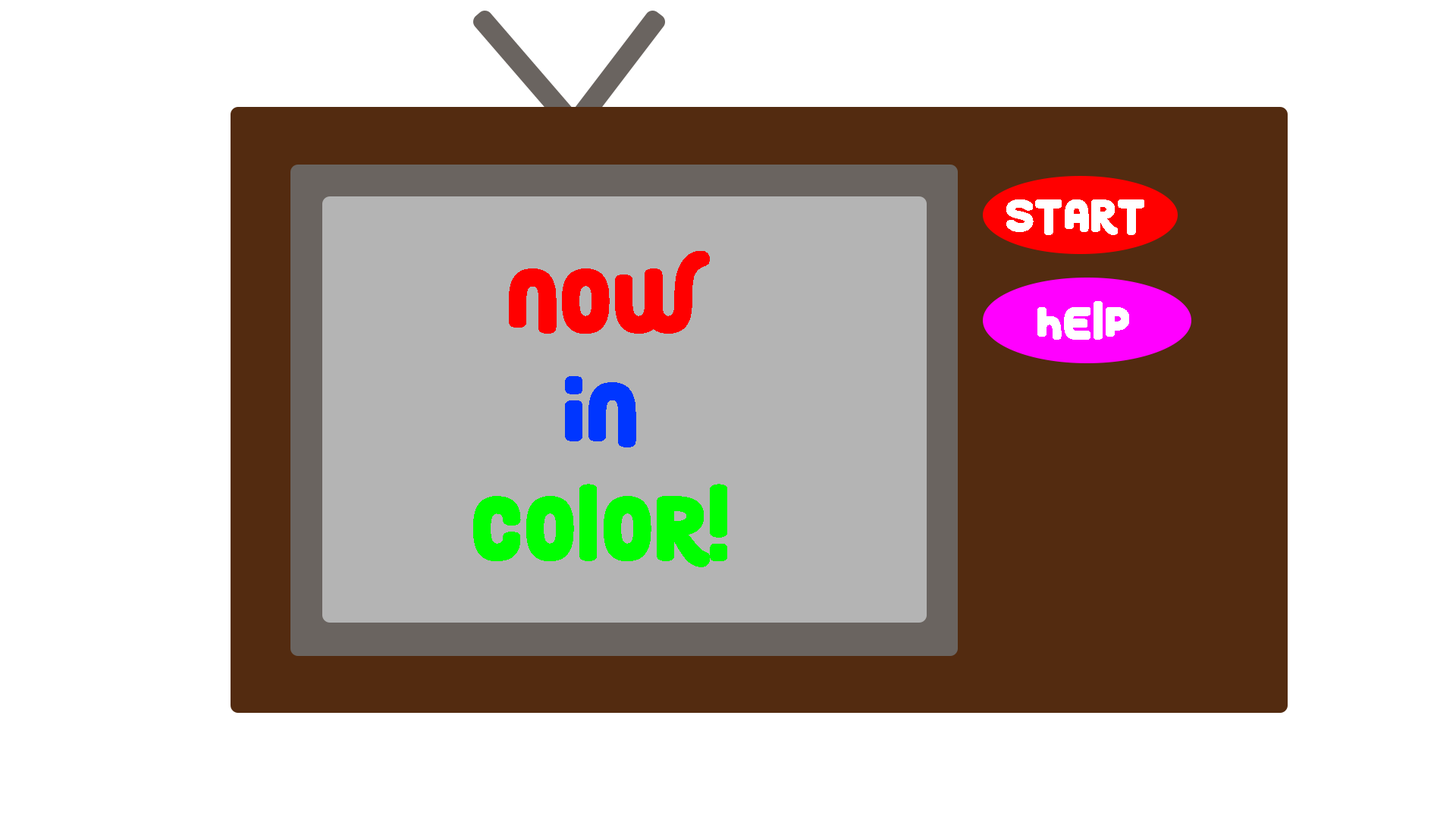
<style>
.page{position:relative;width:1456px;height:819px;background:#ffffff}
.page>*{position:absolute;margin:0}
.t1{font:47.4px "RoundyRainbows";color:#ffffff}
.t2{font:94.8px "RoundyRainbows";color:#00ff00}
.t3{font:94.8px "RoundyRainbows";color:#ff0000}
.t4{font:94.8px "RoundyRainbows";color:#0036ff}
</style>
<div class="page">
<p class="t1" style="left:1006px;top:199px;width:138px;height:36px">Start</p>
<p class="t2" style="left:473px;top:251px;width:254px;height:316px;text-align:center"><span class="t3">Now <br></span><span class="t4">In <br></span>Color!</p>
<p class="t1" style="left:1037px;top:301px;width:92px;height:39px">Help</p>
</div>
